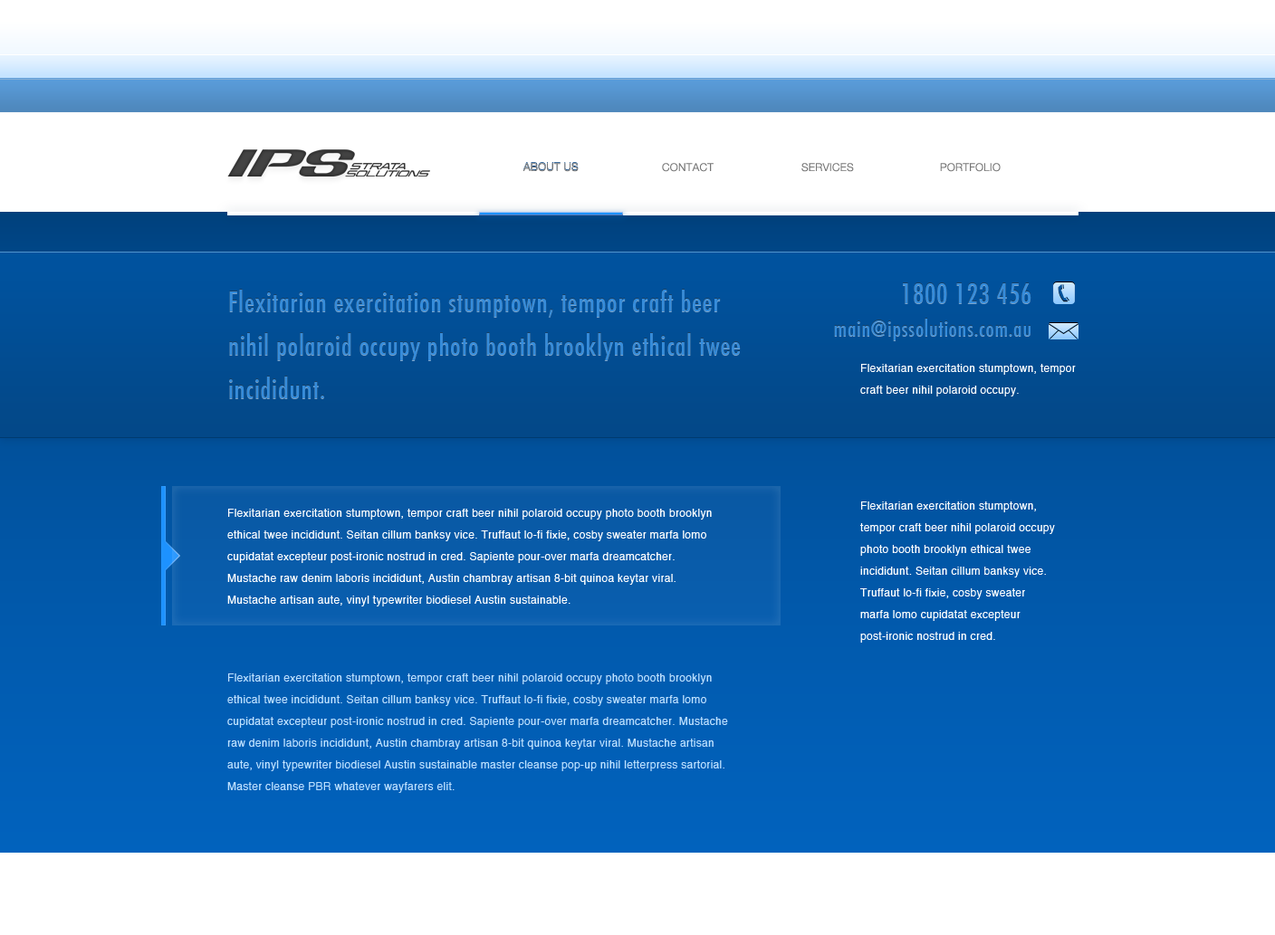
<style>
.page{position:relative;width:1275px;height:935px}
.page>*{position:absolute;margin:0}
.t1{font:10.9px "HelveticaNeue-Light";letter-spacing:0.025em;color:#767676;text-transform:uppercase}
.t2{font:27.2px/43.5px "Futura-CondensedMedium";letter-spacing:0.025em;color:#358cdb}
.t3{font:27.2px "Futura-CondensedMedium";letter-spacing:0.025em;color:#358cdb}
.t4{font:21.7px "Futura-CondensedMedium";letter-spacing:0.025em;color:#358cdb}
.t5{font:10.9px/21.7px "Helvetica";letter-spacing:0.025em;color:#ffffff}
.t6{font:10.9px/21.7px "Helvetica";letter-spacing:0.025em;color:#bee0f6}
</style>
<div class="page">
<p class="t1" style="left:522px;top:163px;width:57px;height:9px">about us</p>
<p class="t1" style="left:522px;top:163px;width:57px;height:9px">about us</p>
<p class="t1" style="left:662px;top:163px;width:51px;height:9px">contact</p>
<p class="t1" style="left:801px;top:163px;width:53px;height:9px">services</p>
<p class="t1" style="left:940px;top:163px;width:61px;height:9px">portfolio</p>
<p class="t2" style="left:229px;top:289px;width:512px;height:109px">Flexitarian exercitation stumptown, tempor craft beer nihil polaroid occupy photo booth brooklyn ethical twee incididunt.</p>
<p class="t3" style="left:903px;top:283px;width:128px;height:20px">1800 123 456</p>
<p class="t4" style="left:834px;top:318px;width:196px;height:22px">main@ipssolutions.com.au</p>
<p class="t5" style="left:860px;top:364px;width:216px;height:33px">Flexitarian exercitation stumptown, tempor craft beer nihil polaroid occupy.</p>
<p class="t5" style="left:227px;top:509px;width:485px;height:98px">Flexitarian exercitation stumptown, tempor craft beer nihil polaroid occupy photo booth brooklyn ethical twee incididunt. Seitan cillum banksy vice. Truffaut lo-fi fixie, cosby sweater marfa lomo cupidatat excepteur post-ironic nostrud in cred. Sapiente pour-over marfa dreamcatcher. Mustache raw denim laboris incididunt, Austin chambray artisan 8-bit quinoa keytar viral. Mustache artisan aute, vinyl typewriter biodiesel Austin sustainable.</p>
<p class="t5" style="left:860px;top:502px;width:195px;height:141px">Flexitarian exercitation stumptown, tempor craft beer nihil polaroid occupy photo booth brooklyn ethical twee incididunt. Seitan cillum banksy vice. Truffaut lo-fi fixie, cosby sweater marfa lomo cupidatat excepteur post-ironic nostrud in cred.</p>
<p class="t6" style="left:227px;top:674px;width:501px;height:119px">Flexitarian exercitation stumptown, tempor craft beer nihil polaroid occupy photo booth brooklyn ethical twee incididunt. Seitan cillum banksy vice. Truffaut lo-fi fixie, cosby sweater marfa lomo cupidatat excepteur post-ironic nostrud in cred. Sapiente pour-over marfa dreamcatcher. Mustache raw denim laboris incididunt, Austin chambray artisan 8-bit quinoa keytar viral. Mustache artisan aute, vinyl typewriter biodiesel Austin sustainable master cleanse pop-up nihil letterpress sartorial. Master cleanse PBR whatever wayfarers elit.</p>
</div>
